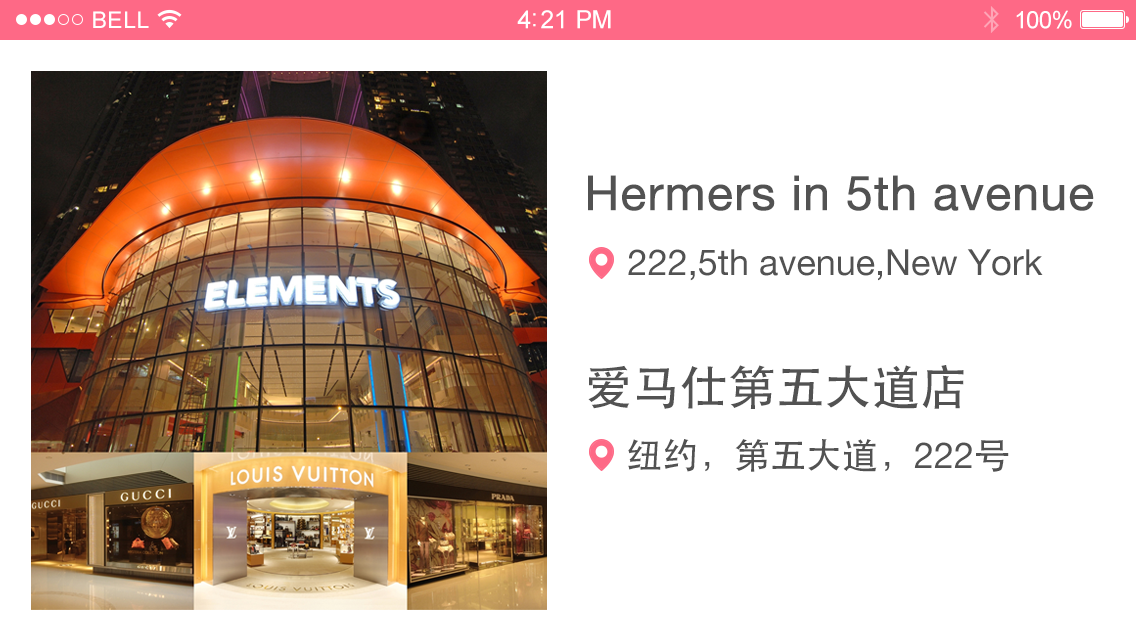
<style>
.page{position:relative;width:1136px;height:640px;background:#ffffff}
.page>*{position:absolute;margin:0}
.t1{font:23px "ArialMT";letter-spacing:0.02em;color:#ffffff}
.t2{font:25px "ArialMT";letter-spacing:-0.02em;color:#ffffff}
.t3{font:24px "ArialMT";letter-spacing:-0.02em;color:#ffffff}
.t4{font:48px "HelveticaNeue";color:#525252;font-weight:bold}
.t5{font:36px "HelveticaNeue";color:#525252}
.t6{font:48px "STHeiti";color:#525252}
.t7{font:36px "STHeiti";color:#525252}
</style>
<div class="page">
<p class="t1" style="left:93px;top:11px;width:56px;height:17px">BELL</p>
<p class="t2" style="left:517px;top:10px;width:94px;height:19px">4:21 PM</p>
<p class="t3" style="left:1016px;top:10px;width:56px;height:19px">100%</p>
<p class="t4" style="left:588px;top:175px;width:506px;height:36px">Hermers in 5th avenue</p>
<p class="t5" style="left:628px;top:249px;width:415px;height:32px">222,5th avenue,New York</p>
<p class="t6" style="left:588px;top:365px;width:376px;height:44px">爱马仕第五大道店</p>
<p class="t7" style="left:628px;top:438px;width:381px;height:34px">纽约，第五大道，<span class="t5">222</span>号</p>
</div>
